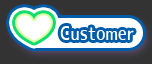
<style>
.page{position:relative;width:152px;height:64px;background:#333333}
.page>*{position:absolute;margin:0}
.t1{font:18px "JK-Gothic-M";color:#ffffff;scale:0.9 1}
</style>
<div class="page">
<p class="t1" style="left:60px;top:26px;width:74px;height:15px">Customer</p>
</div>
